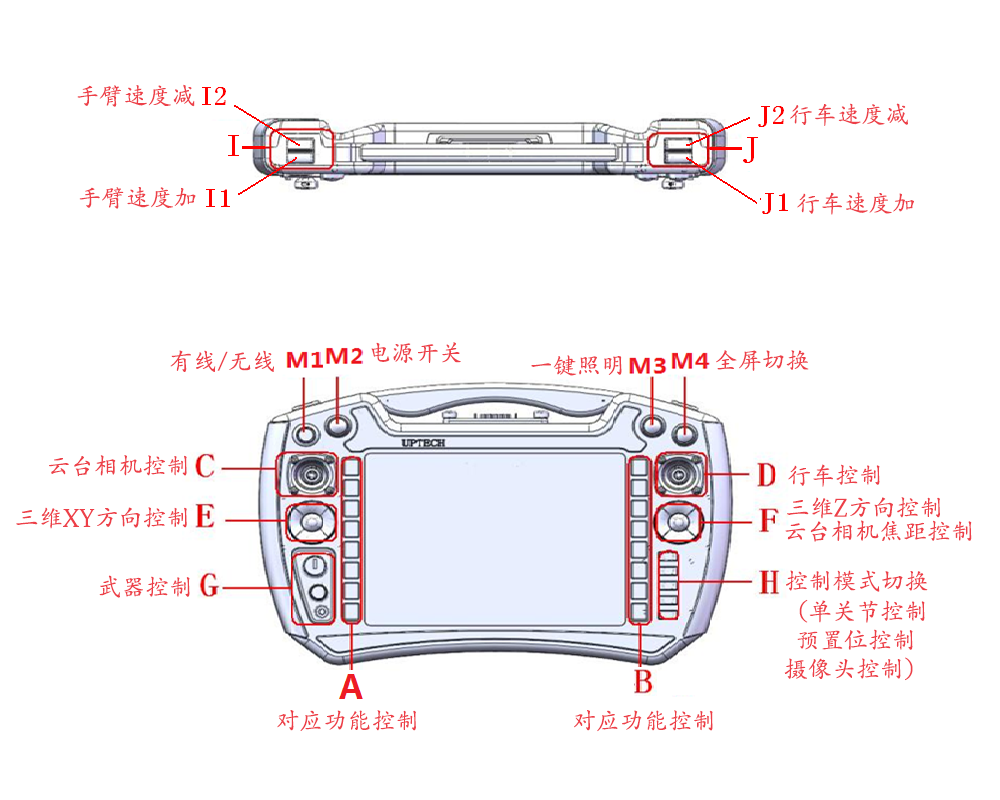
<style>
.page{position:relative;width:1000px;height:800px;background:#ffffff}
.page>*{position:absolute;margin:0}
.t1{font:24px "AdobeKaitiStd-Regular";color:#ed3f48}
</style>
<div class="page">
<p class="t1" style="left:77px;top:84px;width:118px;height:23px">手臂速度减</p>
<p class="t1" style="left:790px;top:103px;width:118px;height:23px">行车速度减</p>
<p class="t1" style="left:79px;top:187px;width:117px;height:22px">手臂速度加</p>
<p class="t1" style="left:797px;top:192px;width:117px;height:23px">行车速度加</p>
<p class="t1" style="left:371px;top:342px;width:90px;height:21px">电源开关</p>
<p class="t1" style="left:170px;top:350px;width:104px;height:22px">有线/无线</p>
<p class="t1" style="left:716px;top:350px;width:93px;height:21px">全屏切换</p>
<p class="t1" style="left:531px;top:355px;width:91px;height:21px">一键照明</p>
<p class="t1" style="left:49px;top:455px;width:138px;height:22px">云台相机控制</p>
<p class="t1" style="left:788px;top:464px;width:92px;height:23px">行车控制</p>
<p class="t1" style="left:787px;top:497px;width:153px;height:22px">三维Z方向控制</p>
<p class="t1" style="left:16px;top:507px;width:171px;height:22px">三维XY方向控制</p>
<p class="t1" style="left:785px;top:520px;width:187px;height:22px">云台相机焦距控制</p>
<p class="t1" style="left:99px;top:575px;width:91px;height:23px">武器控制</p>
<p class="t1" style="left:786px;top:570px;width:142px;height:22px">控制模式切换</p>
<p class="t1" style="left:784px;top:599px;width:141px;height:82px;text-align:center">（单关节控制<br>预置位控制<br>摄像头控制）</p>
<p class="t1" style="left:277px;top:710px;width:139px;height:21px">对应功能控制</p>
<p class="t1" style="left:574px;top:710px;width:139px;height:22px">对应功能控制</p>
</div>
